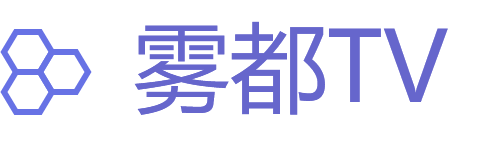
<style>
.page{position:relative;width:487px;height:144px;background:#ffffff}
.page>*{position:absolute;margin:0}
.t1{font:97px "MicrosoftYaHei";color:#6666cc}
</style>
<div class="page">
<p class="t1" style="left:134px;top:21px;width:314px;height:94px">雾都TV</p>
</div>
